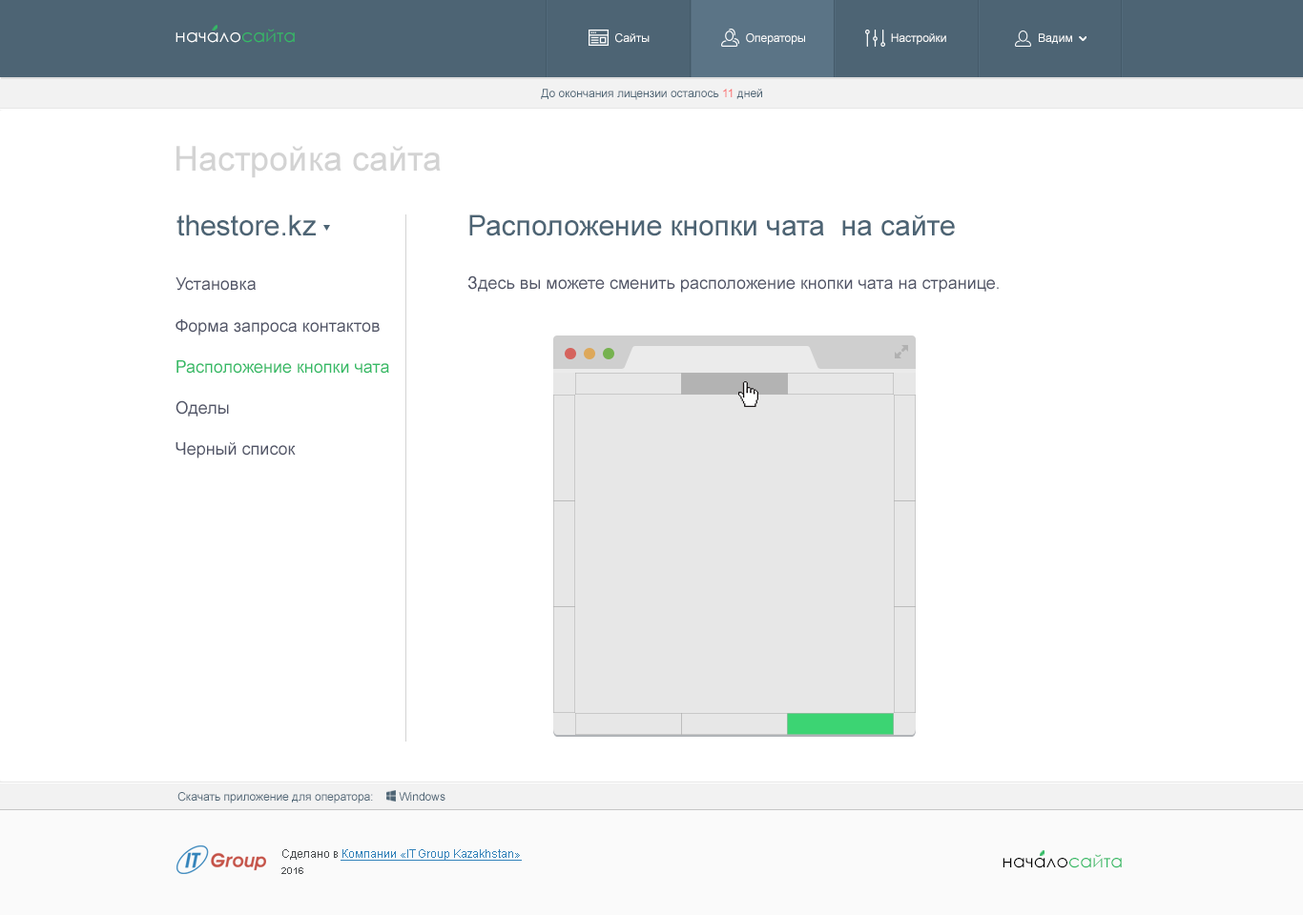
<style>
.page{position:relative;width:1303px;height:915px;background:#ffffff}
.page>*{position:absolute;margin:0}
.t1{font:17.7px "CenturyGothic";color:#ffffff}
.t2{font:17.7px "CenturyGothic";color:#34ba65}
.t3{font:11.4px "ArialMT";color:#ffffff}
.t4{font:11.4px "ArialMT";color:#4d6474}
.t5{font:11.4px "ArialMT";color:#f96969}
.t6{font:34.3px "ArialMT";color:#d3d3d3}
.t7{font:28.6px "ArialMT";color:#4d6474}
.t8{font:17.2px "ArialMT";color:#515567}
.t9{font:17.2px "ArialMT";color:#34ba65}
.t10{font:11.4px "ArialMT";color:#3483ba;text-decoration:underline}
.t11{font:11.4px "ArialMT";color:#4a4d4f}
.t12{font:17.7px "CenturyGothic";color:#000000}
.t13{font:9.5px "Arial-BoldMT";color:#4a4d4f}
</style>
<div class="page">
<p class="t1" style="left:175px;top:29px;width:120px;height:14px">начало<span class="t2">сайта</span></p>
<p class="t3" style="left:615px;top:33px;width:34px;height:10px">Сайты</p>
<p class="t3" style="left:746px;top:33px;width:59px;height:12px">Операторы</p>
<p class="t3" style="left:891px;top:33px;width:55px;height:12px">Настройки</p>
<p class="t3" style="left:1038px;top:33px;width:34px;height:11px">Вадим</p>
<p class="t4" style="left:541px;top:89px;width:221px;height:11px">До окончания лицензии осталось <span class="t5">11</span> дней</p>
<p class="t6" style="left:176px;top:146px;width:265px;height:32px">Настройка сайта</p>
<p class="t7" style="left:176px;top:215px;width:140px;height:21px">thestore.kz</p>
<p class="t7" style="left:469px;top:215px;width:486px;height:21px">Расположение кнопки чата  на сайте</p>
<p class="t8" style="left:175px;top:277px;width:214px;height:182px">Установка<br><br>Форма запроса контактов<br><br><span class="t9">Расположение кнопки чата<br></span><br>Оделы<br><br>Черный список</p>
<p class="t8" style="left:467px;top:276px;width:531px;height:17px">Здесь вы можете сменить расположение кнопки чата на странице.</p>
<p class="t4" style="left:177px;top:792px;width:268px;height:12px">Скачать приложение для оператора:        Windows</p>
<p class="t10" style="left:282px;top:850px;width:240px;height:11px"><span class="t11">Сделано в </span>Компании «IT Group Kazakhstan»</p>
<p class="t12" style="left:1002px;top:854px;width:119px;height:15px">начало<span class="t2">сайта</span></p>
<p class="t13" style="left:281px;top:868px;width:22px;height:6px">2016</p>
</div>
